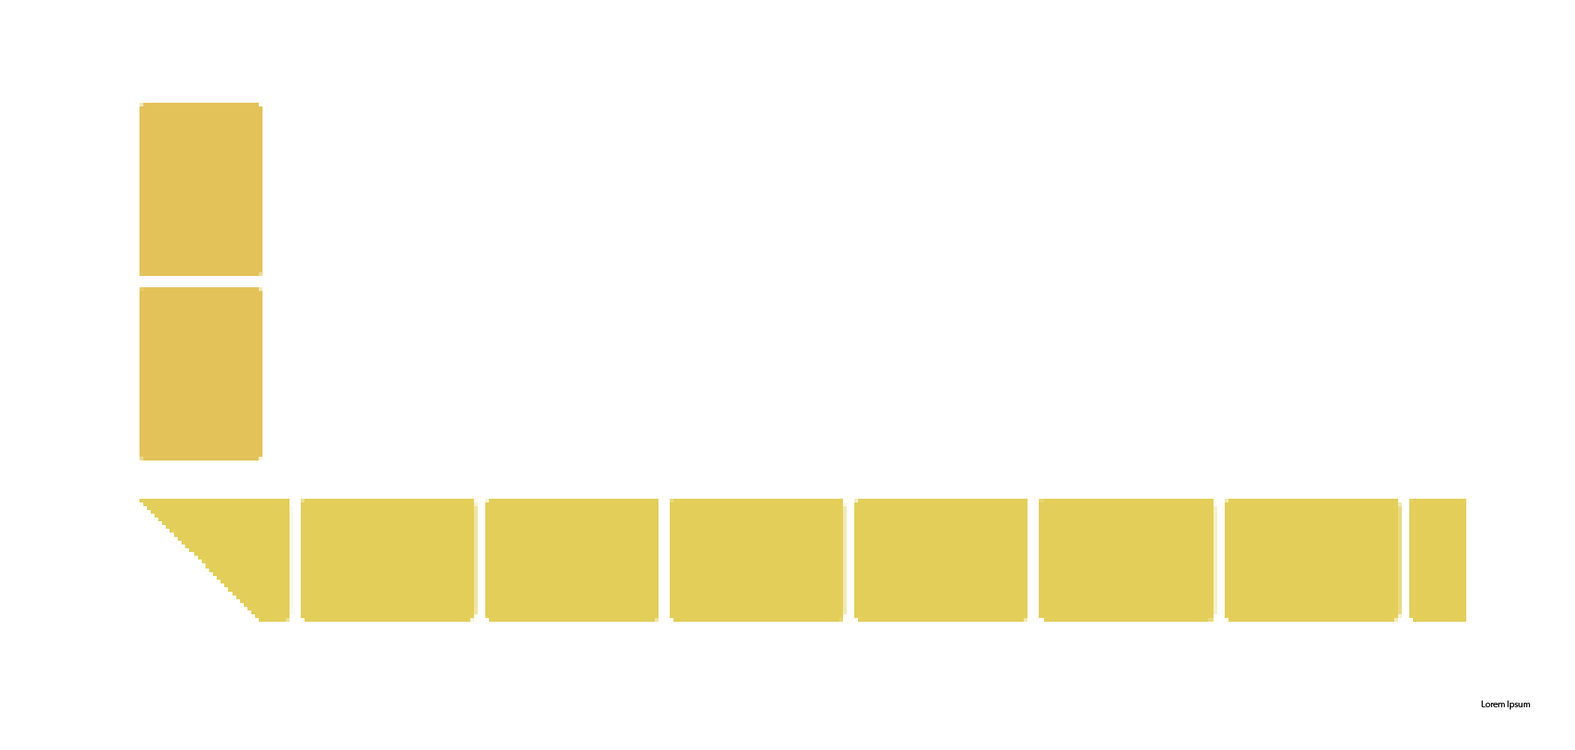
<style>
.page{position:relative;width:1575px;height:750px;background:#ffffff}
.page>*{position:absolute;margin:0}
.t1{font:9px "MyriadPro-Regular";color:#000000}
</style>
<div class="page">
<p class="t1" style="left:1481px;top:700px;width:49px;height:10px">Lorem Ipsum</p>
</div>
